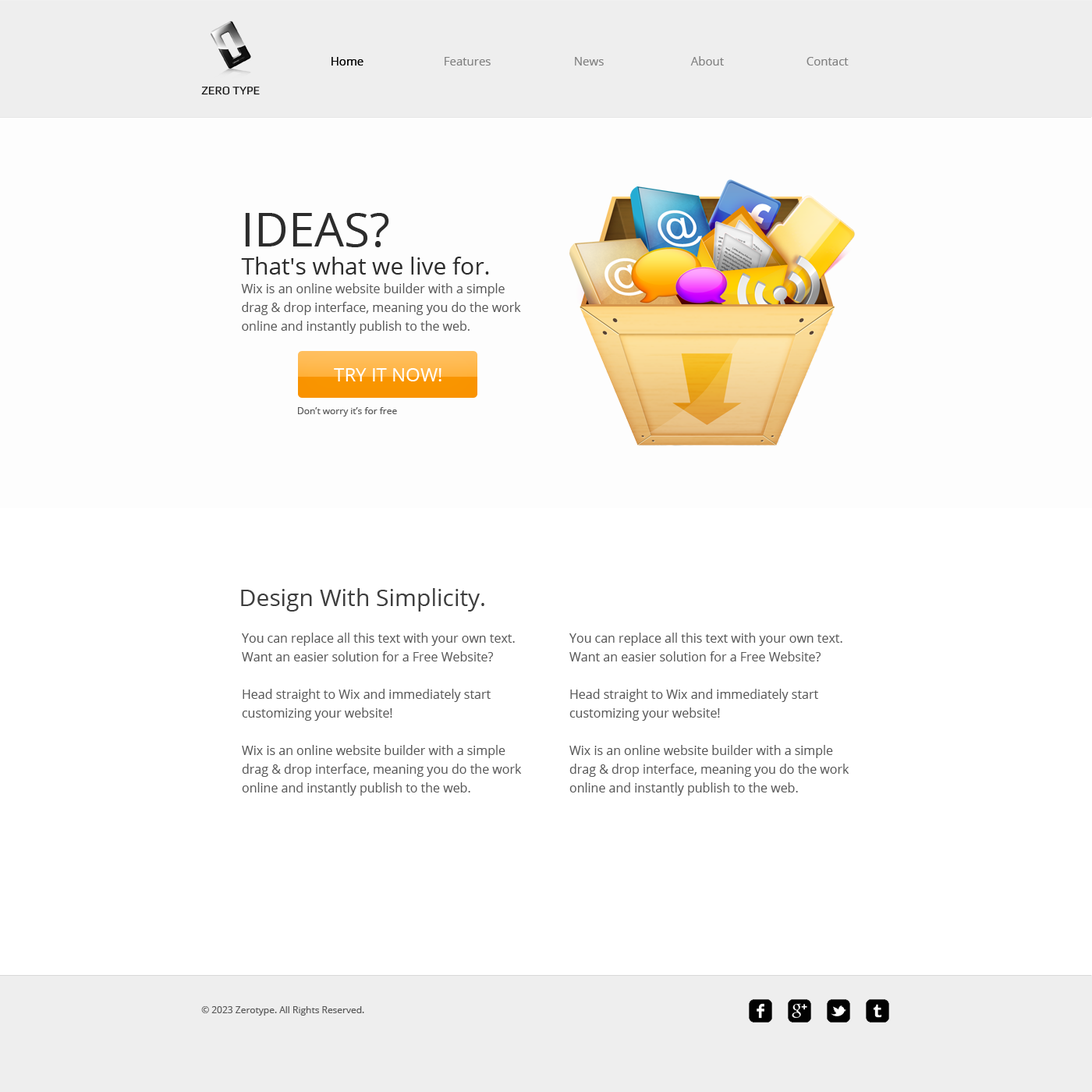
<style>
.page{position:relative;width:1092px;height:1092px;background:#ffffff}
.page>*{position:absolute;margin:0}
.t1{font:11.7px "OpenSans";color:#000000}
.t2{font:11.7px "OpenSans";color:#818181}
.t3{font:11.7px "Play";color:#111111}
.t4{font:12.5px/18.7px "OpenSans";color:#585858}
.t5{font:46.8px/28.1px "OpenSans";color:#2c2c2c}
.t6{font:23.4px/28.1px "OpenSans";color:#2c2c2c}
.t7{font:18.7px "OpenSans";color:#ffffff}
.t8{font:9.4px "OpenSans";color:#585858}
.t9{font:23.4px "OpenSans";color:#3e3e3e}
</style>
<div class="page">
<p class="t1" style="left:331px;top:57px;width:32px;height:9px">Home</p>
<p class="t1" style="left:331px;top:57px;width:32px;height:9px">Home</p>
<p class="t2" style="left:445px;top:57px;width:46px;height:9px">Features</p>
<p class="t2" style="left:575px;top:57px;width:29px;height:9px">News</p>
<p class="t2" style="left:690px;top:56px;width:34px;height:10px">About</p>
<p class="t2" style="left:807px;top:57px;width:42px;height:9px">Contact</p>
<p class="t3" style="left:201px;top:87px;width:59px;height:8px">ZERO TYPE</p>
<p class="t4" style="left:241px;top:213px;width:280px;height:121px"><span class="t5">IDEAS?<br></span><span class="t6">That's what we live for.<br></span>Wix is an online website builder with a simple drag &amp; drop interface, meaning you do the work online and instantly publish to the web.</p>
<p class="t7" style="left:334px;top:368px;width:107px;height:13px">TRY IT NOW!</p>
<p class="t8" style="left:298px;top:407px;width:99px;height:10px">Don’t worry it’s for free</p>
<p class="t9" style="left:241px;top:588px;width:243px;height:24px">Design With Simplicity.</p>
<p class="t4" style="left:242px;top:633px;width:280px;height:163px">You can replace all this text with your own text. Want an easier solution for a Free Website?<br>​<br>Head straight to Wix and immediately start customizing your website!<br>​<br>Wix is an online website builder with a simple drag &amp; drop interface, meaning you do the work online and instantly publish to the web.<br>​</p>
<p class="t4" style="left:569px;top:633px;width:280px;height:163px">You can replace all this text with your own text. Want an easier solution for a Free Website?<br>​<br>Head straight to Wix and immediately start customizing your website!<br>​<br>Wix is an online website builder with a simple drag &amp; drop interface, meaning you do the work online and instantly publish to the web.<br>​</p>
<p class="t8" style="left:201px;top:1006px;width:163px;height:10px">© 2023 Zerotype. All Rights Reserved.</p>
</div>
